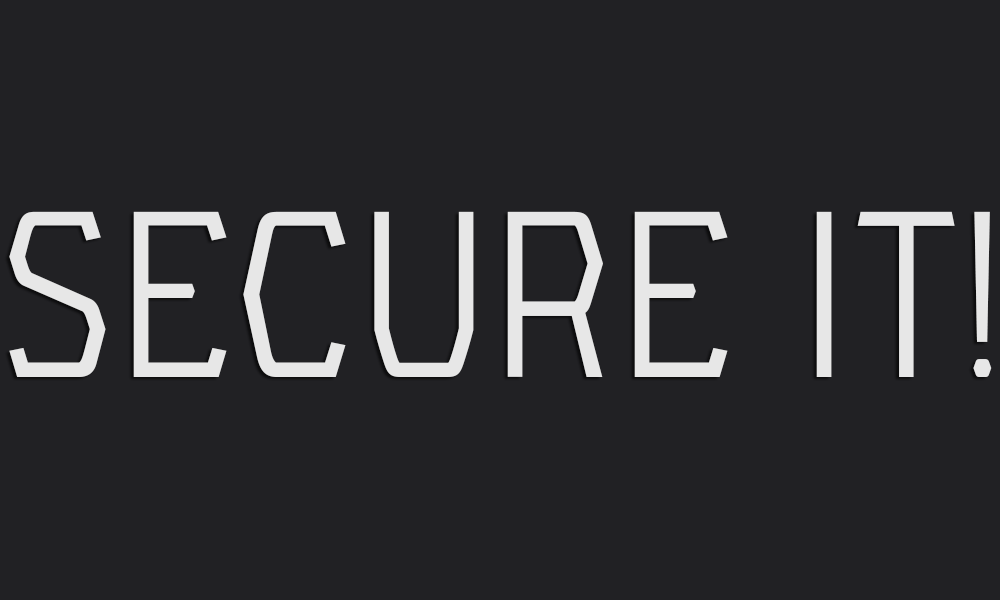
<style>
.page{position:relative;width:1000px;height:600px;background:#212124}
.page>*{position:absolute;margin:0}
.t1{font:235.9px "Yeager-Light";color:#f6f6f6}
</style>
<div class="page">
<p class="t1" style="left:9px;top:211px;width:983px;height:166px;opacity:0.9">Secure it!</p>
</div>
